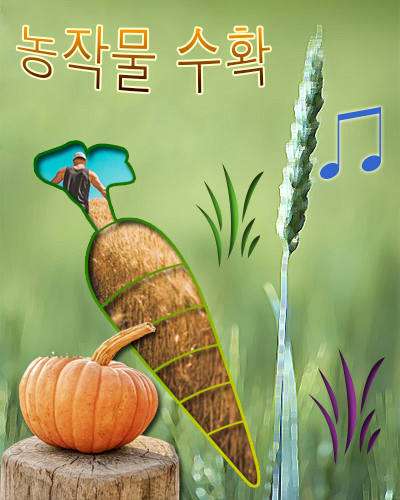
<style>
.page{position:relative;width:400px;height:500px}
.page>*{position:absolute;margin:0}
.t1{font:48px "Dotum"}
</style>
<div class="page">
<p class="t1" style="left:17px;top:26px;width:253px;height:68px">농작물 수확</p>
</div>
